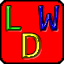
<style>
.page{position:relative;width:64px;height:64px;background:#ff0000}
.page>*{position:absolute;margin:0}
.t1{font:37.8px/27.7px "Consolas";letter-spacing:0.38em;font-weight:bold}
</style>
<div class="page">
<p class="t1" style="left:6px;top:6px;width:53px;height:53px;text-align:center">LW<br> D</p>
</div>
